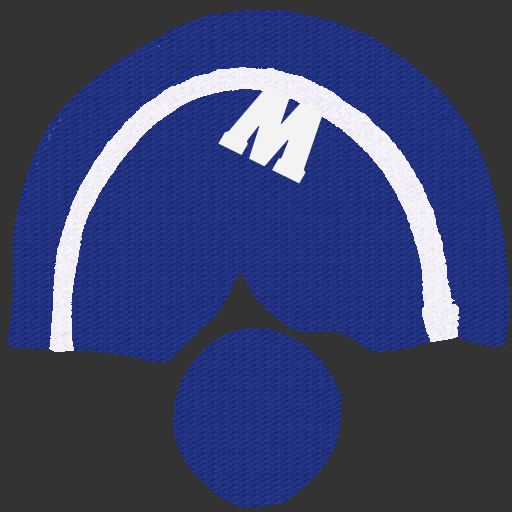
<style>
.page{position:relative;width:512px;height:512px;background:#333333}
.page>*{position:absolute;margin:0}
.t1{font:97.8px "AcmeFont";color:#f3f3f3;scale:1.03 1}
</style>
<div class="page">
<p class="t1" style="left:218px;top:85px;width:105px;height:99px;rotate:-154deg">W</p>
</div>
